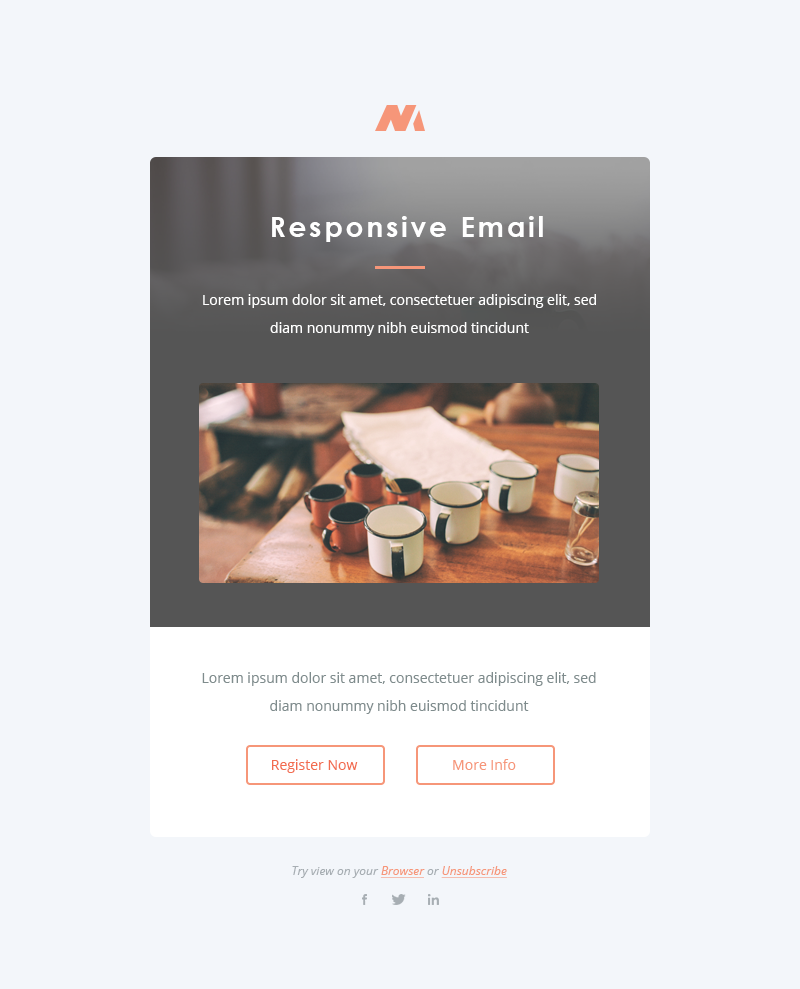
<style>
.page{position:relative;width:800px;height:989px;background:#f3f6fa}
.page>*{position:absolute;margin:0}
.t1{font:28px "CenturyGothic-Bold";letter-spacing:0.1em;color:#ffffff}
.t2{font:14px/28px "OpenSans";color:#ffffff}
.t3{font:14px/28px "OpenSans";color:#7f8c8d}
.t4{font:14px "OpenSans";color:#f26c4f}
.t5{font:14px "OpenSans";color:#f69679}
.t6{font:12px "OpenSans-Italic";color:#a7aeb3}
.t7{font:12px "OpenSans-Italic";color:#f69679;text-decoration:underline}
</style>
<div class="page">
<p class="t1" style="left:272px;top:216px;width:271px;height:26px">Responsive Email</p>
<p class="t2" style="left:203px;top:294px;width:393px;height:42px;text-align:center">Lorem ipsum dolor sit amet, consectetuer adipiscing elit, sed diam nonummy nibh euismod tincidunt</p>
<p class="t3" style="left:202px;top:672px;width:394px;height:42px;text-align:center">Lorem ipsum dolor sit amet, consectetuer adipiscing elit, sed diam nonummy nibh euismod tincidunt</p>
<p class="t4" style="left:272px;top:759px;width:86px;height:14px">Register Now</p>
<p class="t5" style="left:453px;top:759px;width:63px;height:11px">More Info</p>
<p class="t6" style="left:292px;top:866px;width:215px;height:12px">Try view on your <span class="t7">Browser </span>or <span class="t7">Unsubscribe</span></p>
</div>
